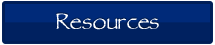
<style>
.page{position:relative;width:215px;height:45px;background:#002160}
.page>*{position:absolute;margin:0}
.t1{font:36px "ParchmentMF";color:#ffffff}
</style>
<div class="page">
<p class="t1" style="left:56px;top:13px;width:103px;height:17px">Resources</p>
</div>
